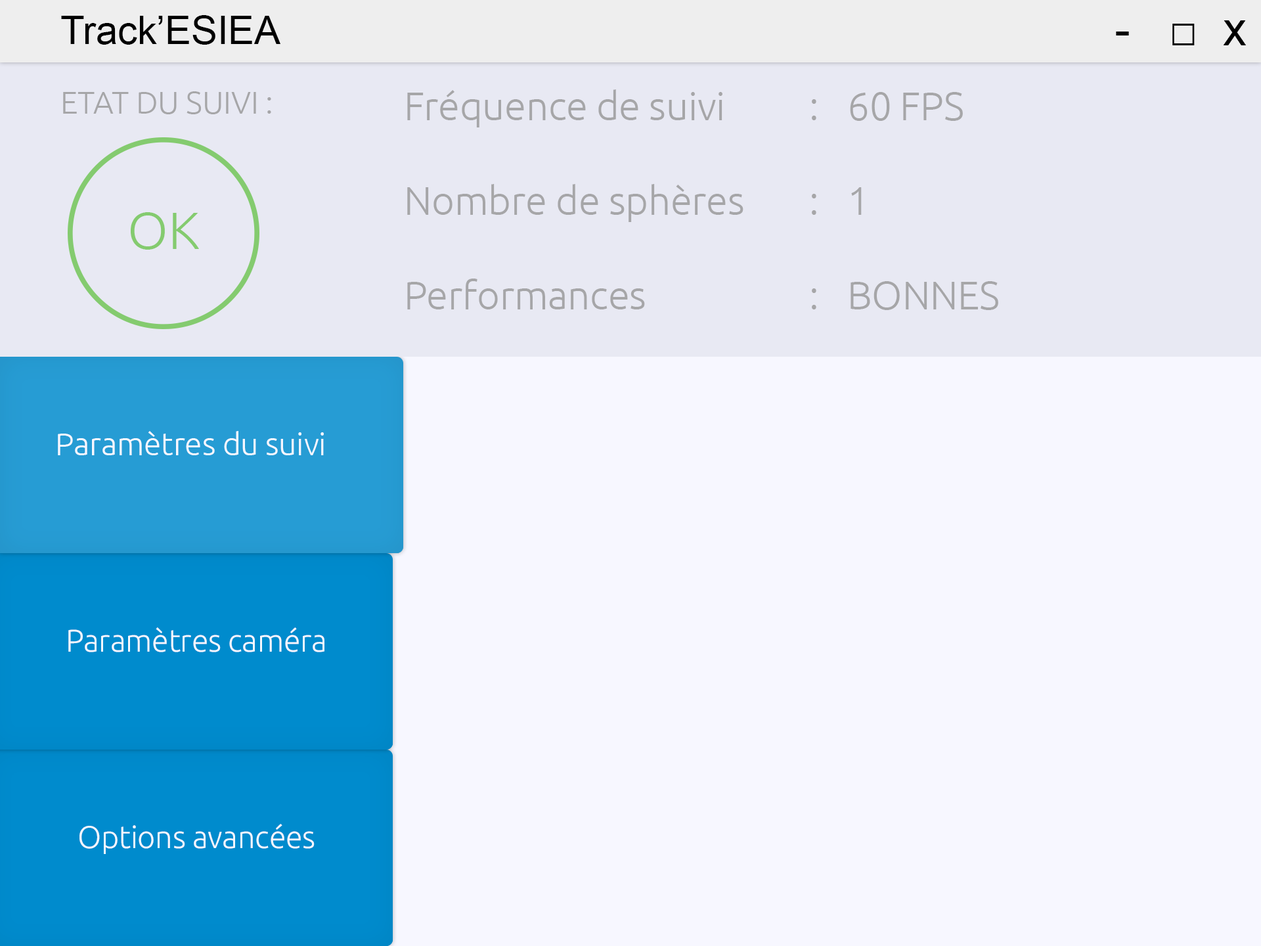
<style>
.page{position:relative;width:1261px;height:946px;background:#f7f7ff}
.page>*{position:absolute;margin:0}
.t1{font:39.4px "ArialMT";letter-spacing:-0.005em;color:#000000}
.t2{font:47.3px "ArialMT";letter-spacing:-0.005em;color:#000000}
.t3{font:39.4px "Ubuntu-Light";letter-spacing:-0.005em;color:#a6a6a8}
.t4{font:31.5px "Ubuntu-Light";letter-spacing:-0.005em;color:#a6a6a8}
.t5{font:52.5px "Ubuntu-Light";letter-spacing:-0.005em;color:#84cb6f}
.t6{font:31.5px "Ubuntu-Light";letter-spacing:-0.005em;color:#f7f7ff}
</style>
<div class="page">
<p class="t1" style="left:61px;top:15px;width:219px;height:30px">Track’ESIEA</p>
<p class="t2" style="left:1116px;top:20px;width:130px;height:25px">-   □  x</p>
<p class="t3" style="left:407px;top:89px;width:336px;height:220px">Fréquence de suivi<br><br>Nombre de sphères<br><br>Performances</p>
<p class="t4" style="left:63px;top:91px;width:208px;height:23px">ETAT DU SUIVI :</p>
<p class="t3" style="left:812px;top:99px;width:4px;height:210px">:<br><br>:<br><br>:</p>
<p class="t3" style="left:850px;top:92px;width:148px;height:218px">60 FPS<br><br>1<br><br>BONNES</p>
<p class="t5" style="left:131px;top:212px;width:68px;height:38px">OK</p>
<p class="t6" style="left:58px;top:431px;width:266px;height:24px">Paramètres du suivi</p>
<p class="t6" style="left:68px;top:627px;width:256px;height:25px">Paramètres caméra</p>
<p class="t6" style="left:79px;top:824px;width:236px;height:30px">Options avancées</p>
</div>
